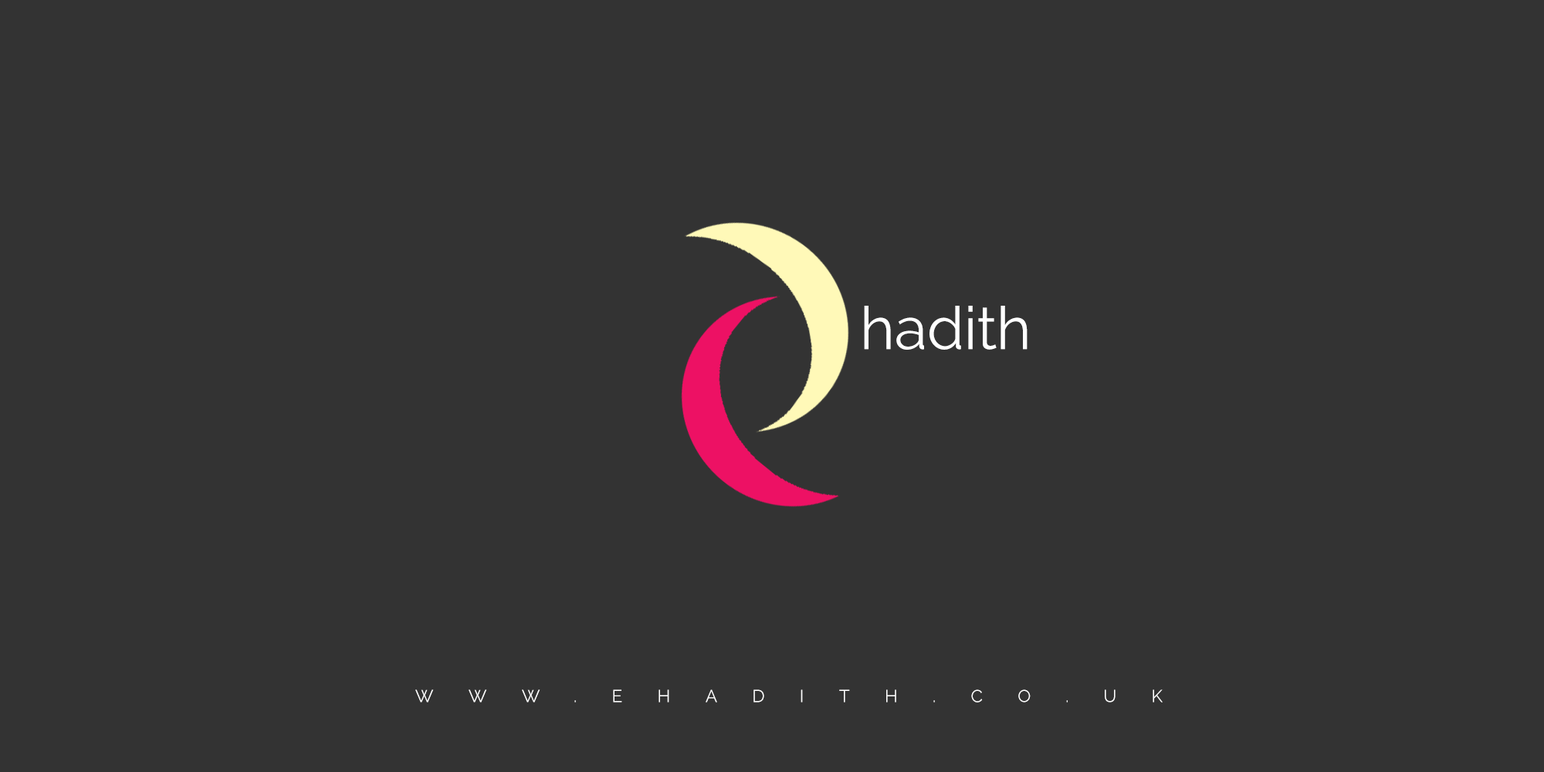
<style>
.page{position:relative;width:1544px;height:772px;background:#333333}
.page>*{position:absolute;margin:0}
.t1{font:59.4px "Raleway-Regular";color:#ffffff}
.t2{font:17.5px "Raleway-Regular";letter-spacing:2em;color:#ffffff;text-transform:uppercase}
</style>
<div class="page">
<p class="t1" style="left:864px;top:306px;width:164px;height:44px">hadith</p>
<p class="t2" style="left:415px;top:690px;width:748px;height:13px">www.ehadith.co.uk</p>
</div>
